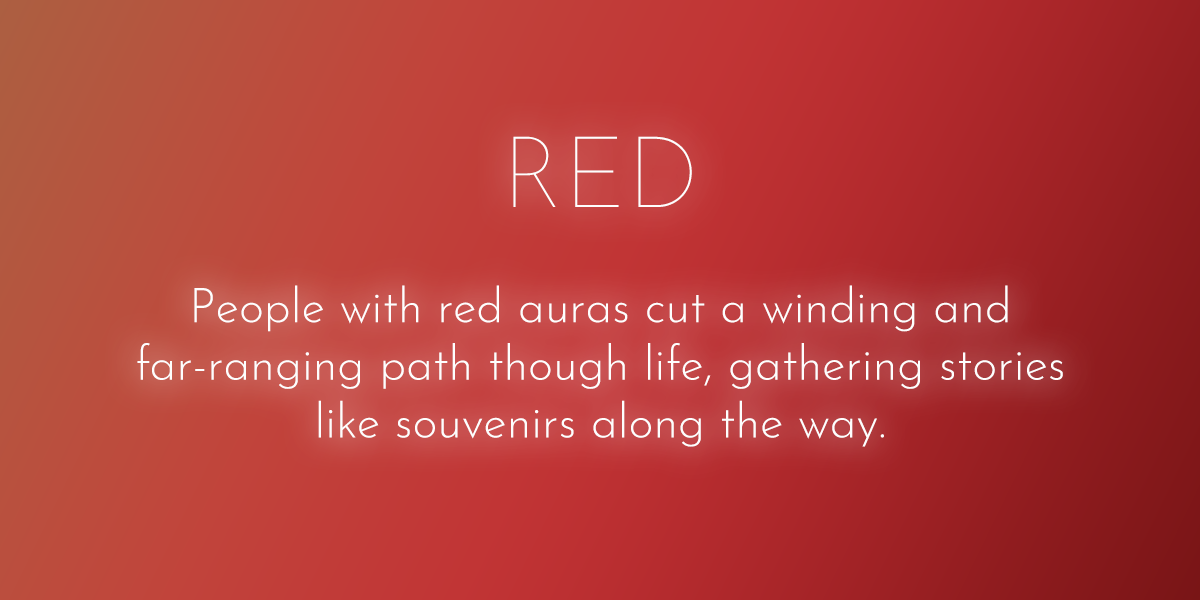
<style>
.page{position:relative;width:1200px;height:600px}
.page>*{position:absolute;margin:0}
.t1{font:48px "JosefinSans-Light";color:#fefefe}
.t2{font:100px "JosefinSans-Light";color:#fefefe}
.t3{font:100px "JosefinSans-Thin";color:#fefefe}
</style>
<div class="page">
<p class="t1" style="left:137px;top:136px;width:926px;height:311px;text-align:center"><span class="t2"><br></span><span class="t3">RED<br></span><br>People with red auras cut a winding and far-ranging path though life, gathering stories like souvenirs along the way.</p>
</div>
